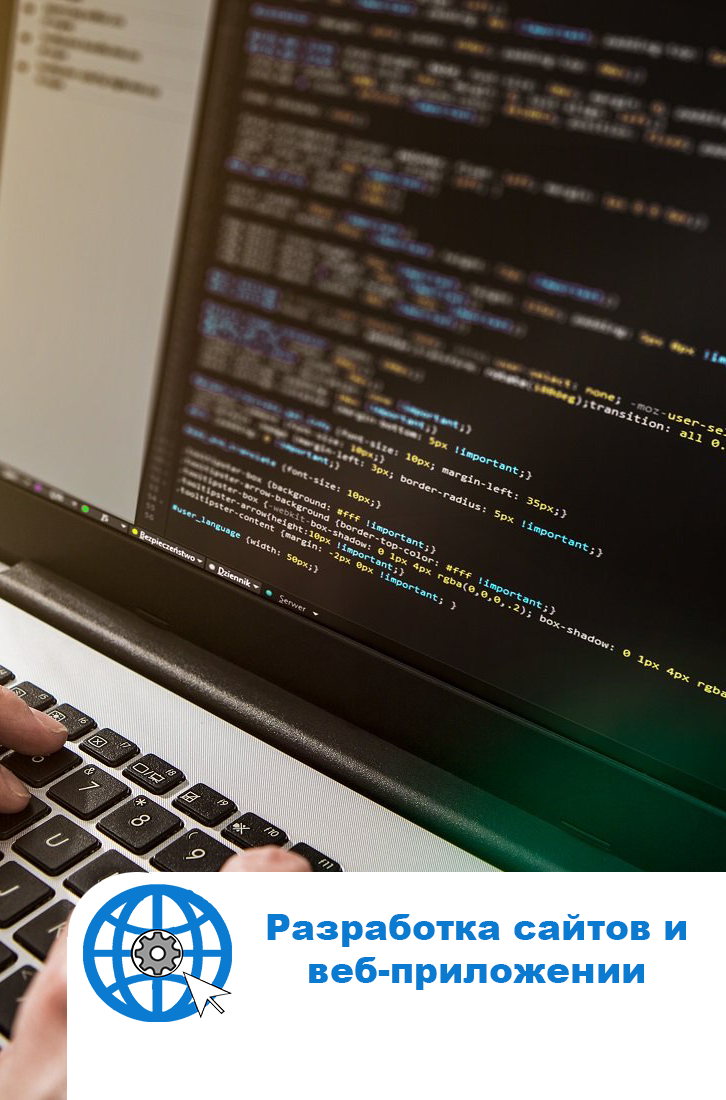
<style>
.page{position:relative;width:726px;height:1100px}
.page>*{position:absolute;margin:0}
.t1{font:36px "Arial-Black";color:#0b7bd1}
</style>
<div class="page">
<p class="t1" style="left:267px;top:914px;width:419px;height:76px;text-align:center">Разработка сайтов и веб-приложении</p>
</div>
